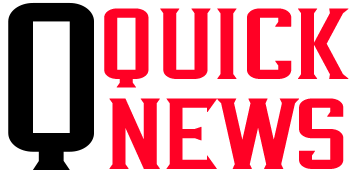
<style>
.page{position:relative;width:355px;height:171px;background:#ffffff}
.page>*{position:absolute;margin:0}
.t1{font:211.8px "VintageWhiskey-Regular";color:#000101;scale:1.32 1}
.t2{font:100px/90px "VintageWhiskey-Regular";letter-spacing:-0.05em;color:#ff0125;font-weight:bold;scale:1.43 1}
</style>
<div class="page">
<p class="t1" style="left:8px;top:2px;width:86px;height:168px">Q</p>
<p class="t2" style="left:104px;top:8px;width:245px;height:161px;text-align:center">Quick<br>NEWS</p>
</div>
